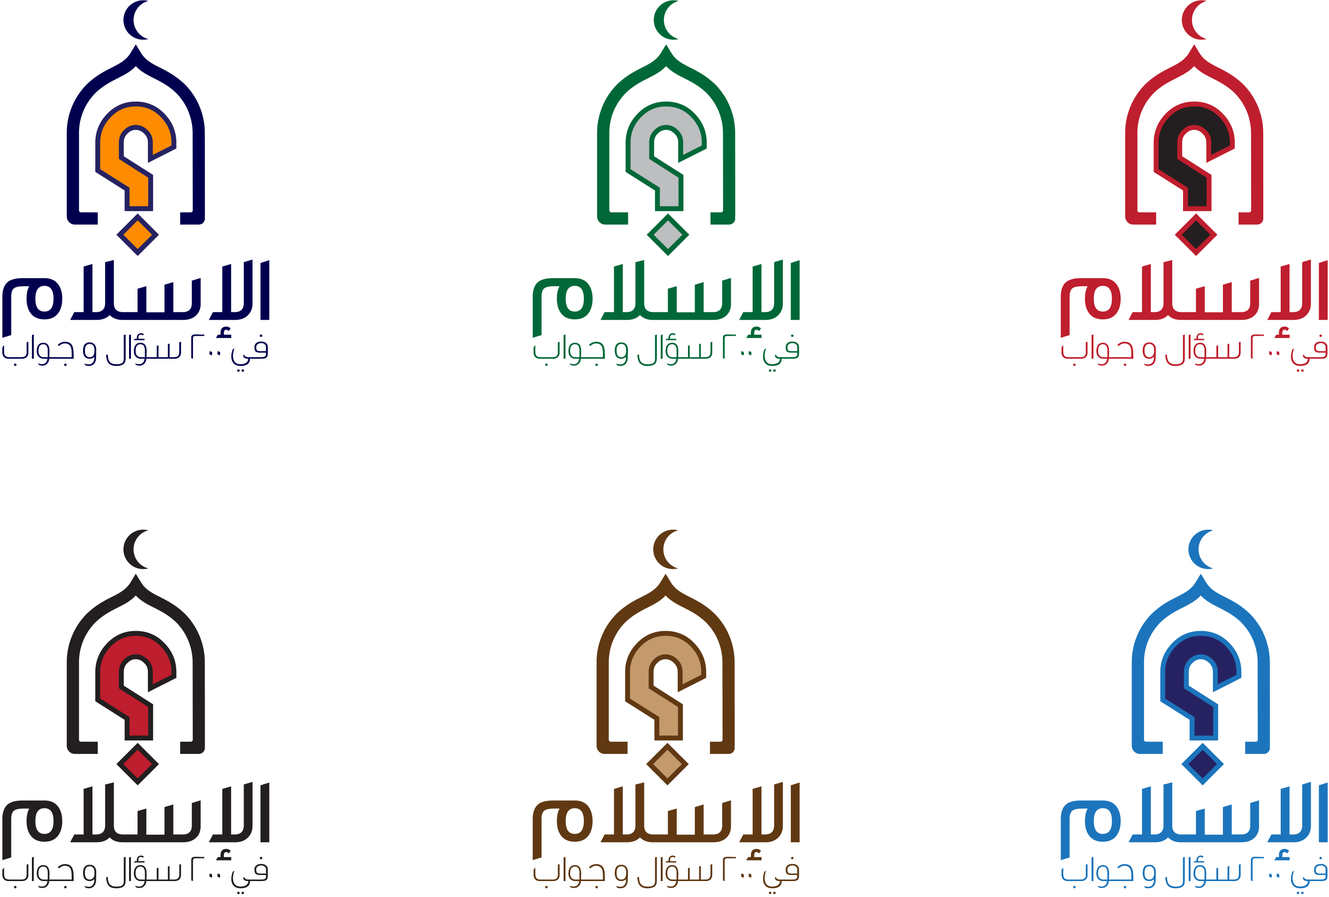
<style>
.page{position:relative;width:1329px;height:897px;background:#ffffff}
.page>*{position:absolute;margin:0}
.t1{font:37.5px "GEDinarOne-Light";color:#00004f}
.t2{font:37.5px "GEDinarOne-Light";color:#006838}
.t3{font:37.5px "GEDinarOne-Light";color:#be1e2d}
.t4{font:37.5px "GEDinarOne-Light";color:#231f20}
.t5{font:37.5px "GEDinarOne-Light";color:#603913}
.t6{font:37.5px "GEDinarOne-Light";color:#1c75bc}
</style>
<div class="page">
<p class="t1" style="left:2px;top:333px;width:266px;height:39px">في 200 سؤال و جواب</p>
<p class="t2" style="left:533px;top:333px;width:266px;height:39px">في 200 سؤال و جواب</p>
<p class="t3" style="left:1061px;top:333px;width:266px;height:39px">في 200 سؤال و جواب</p>
<p class="t4" style="left:2px;top:856px;width:266px;height:39px">في 200 سؤال و جواب</p>
<p class="t5" style="left:533px;top:856px;width:266px;height:39px">في 200 سؤال و جواب</p>
<p class="t6" style="left:1061px;top:856px;width:266px;height:39px">في 200 سؤال و جواب</p>
</div>
